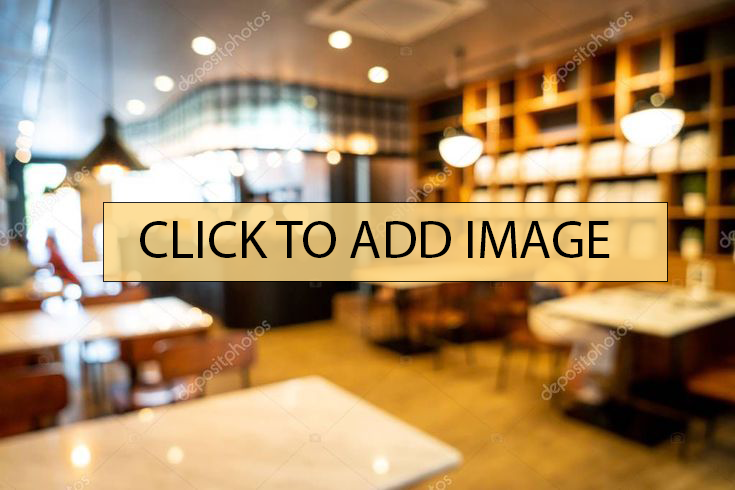
<style>
.page{position:relative;width:735px;height:490px}
.page>*{position:absolute;margin:0}
.t1{font:53.3px "MyriadPro-Regular";color:#000000}
</style>
<div class="page">
<p class="t1" style="left:140px;top:221px;width:470px;height:37px">CLICK TO ADD IMAGE</p>
</div>
